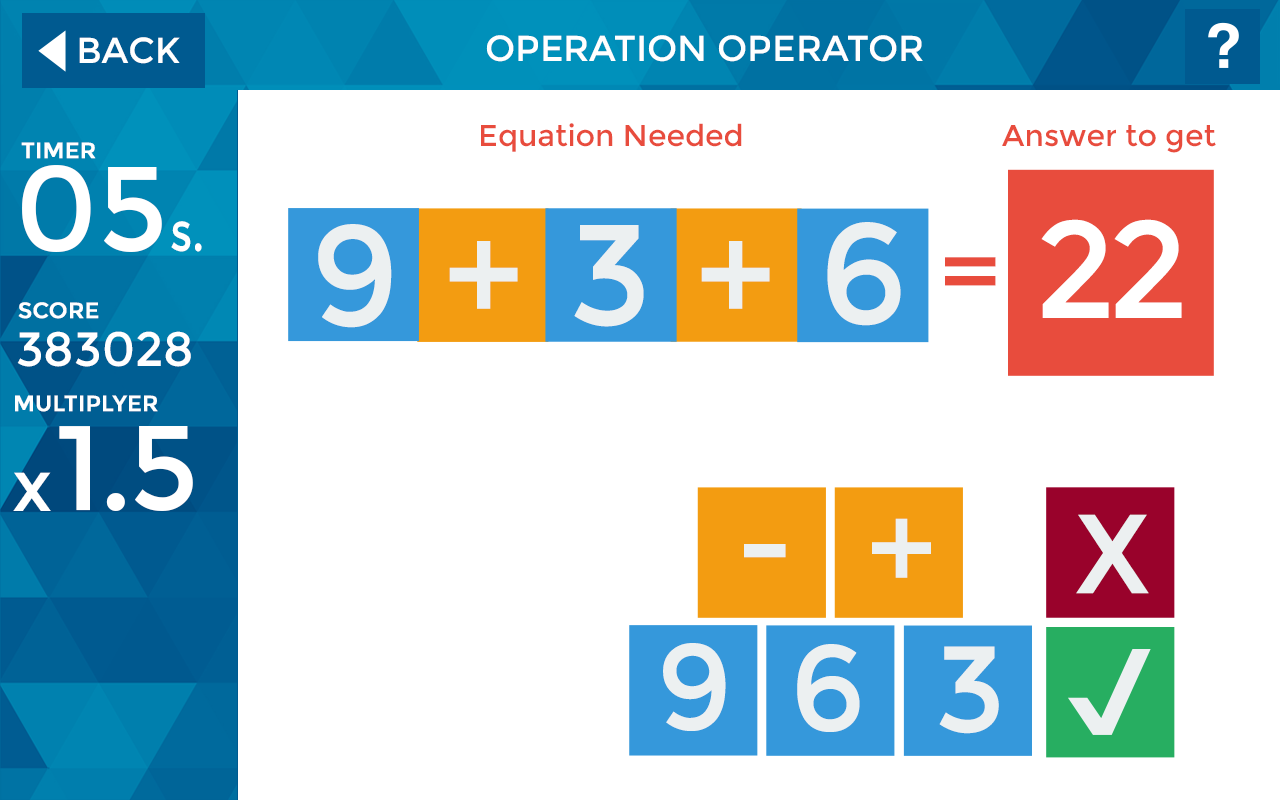
<style>
.page{position:relative;width:1280px;height:800px;background:#ffffff}
.page>*{position:absolute;margin:0}
.t1{font:36px "Montserrat-Regular";color:#ffffff}
.t2{font:36px "Montserrat-Regular";color:#ffffff;text-transform:uppercase}
.t3{font:30px "Montserrat-Regular";color:#e84c3d}
.t4{font:22px "Montserrat-Regular";color:#ffffff;font-weight:bold}
.t5{font:120px "Montserrat-Regular";color:#ffffff}
.t6{font:55px "Montserrat-Regular";color:#ffffff;scale:0.8 1}
.t7{font:143.2px "Montserrat-Regular";color:#ecf0f1}
.t8{font:137px "Montserrat-Regular";letter-spacing:-0.06em;color:#ffffff}
.t9{font:100px "Montserrat-Regular";letter-spacing:-0.06em;color:#e84c3d}
.t10{font:48px "Montserrat-Regular";color:#ffffff}
.t11{font:120px "Montserrat-Regular";letter-spacing:-0.025em;color:#ffffff}
.t12{font:72px "Montserrat-Regular";color:#ffffff}
.t13{font:125px "Montserrat-Regular";color:#ecf0f1}
.t14{font:112.1px "Montserrat-Regular";color:#ecf0f1;text-transform:uppercase}
.t15{font:121.9px "Montserrat-Regular";color:#ecf0f1;text-transform:uppercase}
</style>
<div class="page">
<p class="t1" style="left:79px;top:37px;width:101px;height:27px">BACK</p>
<p class="t2" style="left:486px;top:35px;width:437px;height:27px">Operation Operator</p>
<p class="t3" style="left:481px;top:123px;width:261px;height:29px">Equation Needed</p>
<p class="t3" style="left:1002px;top:125px;width:214px;height:28px">Answer to get</p>
<p class="t4" style="left:21px;top:142px;width:75px;height:17px">TIMER</p>
<p class="t5" style="left:22px;top:165px;width:140px;height:87px">05</p>
<p class="t6" style="left:171px;top:221px;width:31px;height:31px">s.</p>
<p class="t7" style="left:827px;top:222px;width:74px;height:104px">6</p>
<p class="t8" style="left:1041px;top:219px;width:141px;height:99px">22</p>
<p class="t7" style="left:318px;top:224px;width:74px;height:104px">9</p>
<p class="t7" style="left:574px;top:225px;width:70px;height:102px">3</p>
<p class="t7" style="left:449px;top:241px;width:69px;height:68px">+</p>
<p class="t7" style="left:701px;top:241px;width:69px;height:68px">+</p>
<p class="t9" style="left:945px;top:257px;width:51px;height:29px">=</p>
<p class="t4" style="left:18px;top:302px;width:81px;height:17px">SCORE</p>
<p class="t10" style="left:17px;top:331px;width:174px;height:36px">383028</p>
<p class="t4" style="left:15px;top:395px;width:143px;height:17px">MULTIPLYER</p>
<p class="t11" style="left:59px;top:426px;width:134px;height:85px">1.5</p>
<p class="t12" style="left:13px;top:472px;width:38px;height:39px">x</p>
<p class="t13" style="left:872px;top:518px;width:59px;height:60px">+</p>
<p class="t14" style="left:1076px;top:514px;width:73px;height:80px">x</p>
<p class="t13" style="left:744px;top:544px;width:42px;height:14px">-</p>
<p class="t15" style="left:663px;top:643px;width:63px;height:88px">9</p>
<p class="t15" style="left:797px;top:644px;width:63px;height:88px">6</p>
<p class="t15" style="left:939px;top:646px;width:60px;height:88px">3</p>
</div>
